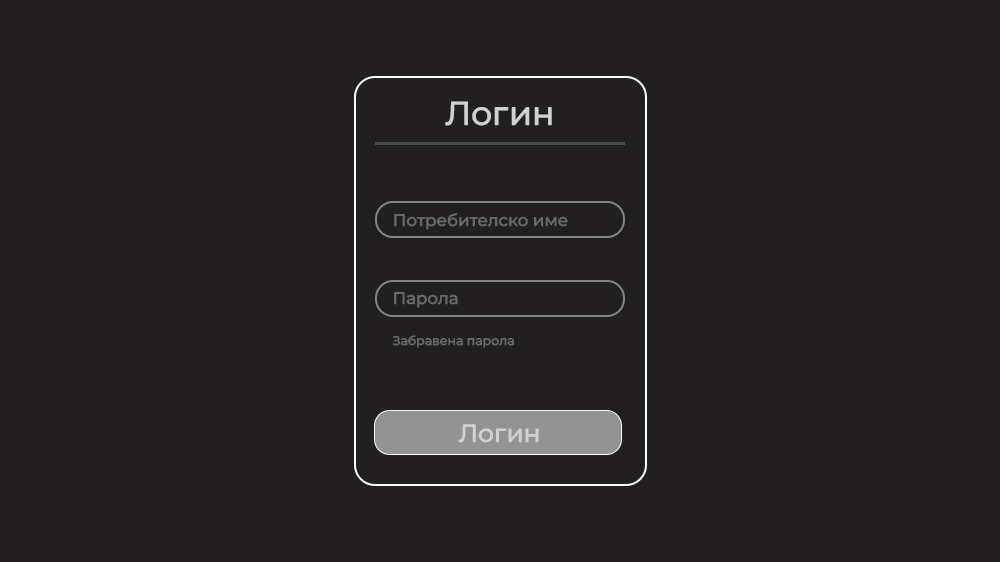
<style>
.page{position:relative;width:1000px;height:562px;background:#211f1f}
.page>*{position:absolute;margin:0}
.t1{font:33.3px "MontserratRoman-Medium";color:#d1d1d1}
.t2{font:16.7px "MontserratRoman-Medium";color:#696969}
.t3{font:12.5px "MontserratRoman-Medium";color:#696969}
.t4{font:25px "MontserratRoman-Medium";color:#d1d1d1}
</style>
<div class="page">
<p class="t1" style="left:445px;top:101px;width:107px;height:25px">Логин</p>
<p class="t2" style="left:394px;top:213px;width:174px;height:17px">Потребителско име</p>
<p class="t2" style="left:394px;top:292px;width:64px;height:16px">Парола</p>
<p class="t3" style="left:392px;top:335px;width:122px;height:13px">Забравена парола</p>
<p class="t4" style="left:458px;top:424px;width:81px;height:19px">Логин</p>
</div>
